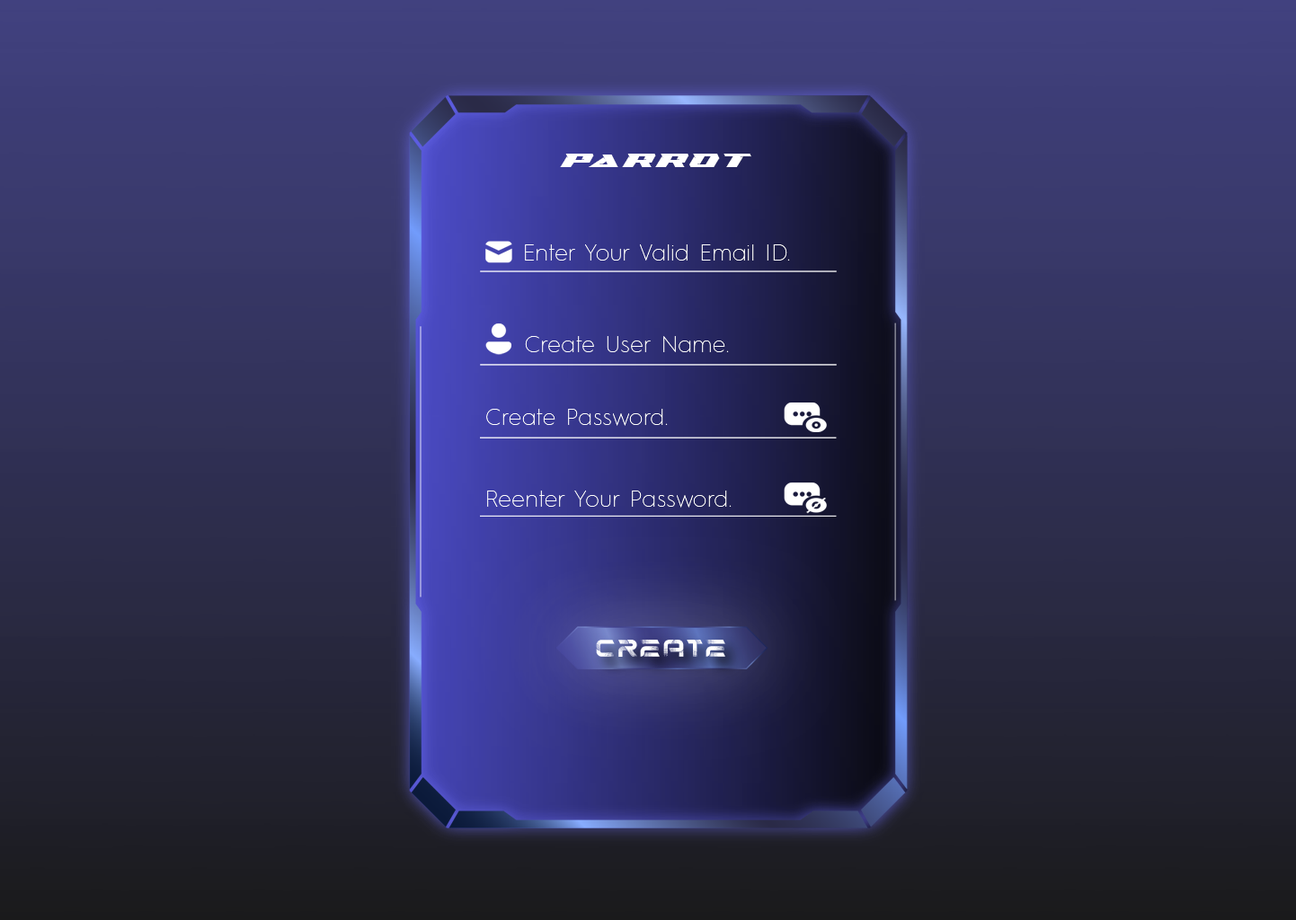
<style>
.page{position:relative;width:1296px;height:920px}
.page>*{position:absolute;margin:0}
.t1{font:18px "SwipeRaceDemoRegular";letter-spacing:0.184em;color:#ffffff}
.t2{font:22.6px "HurmeGeometricSans1-Thin";letter-spacing:0.034em;color:#ffffff}
</style>
<div class="page">
<p class="t1" style="left:560px;top:154px;width:191px;height:13px">Parrot</p>
<p class="t2" style="left:525px;top:244px;width:265px;height:17px">Enter Your Valid Email ID.</p>
<p class="t2" style="left:525px;top:336px;width:204px;height:16px">Create User Name.</p>
<p class="t2" style="left:486px;top:409px;width:182px;height:17px">Create Password.</p>
<p class="t2" style="left:487px;top:491px;width:244px;height:17px">Reenter Your Password.</p>
</div>
